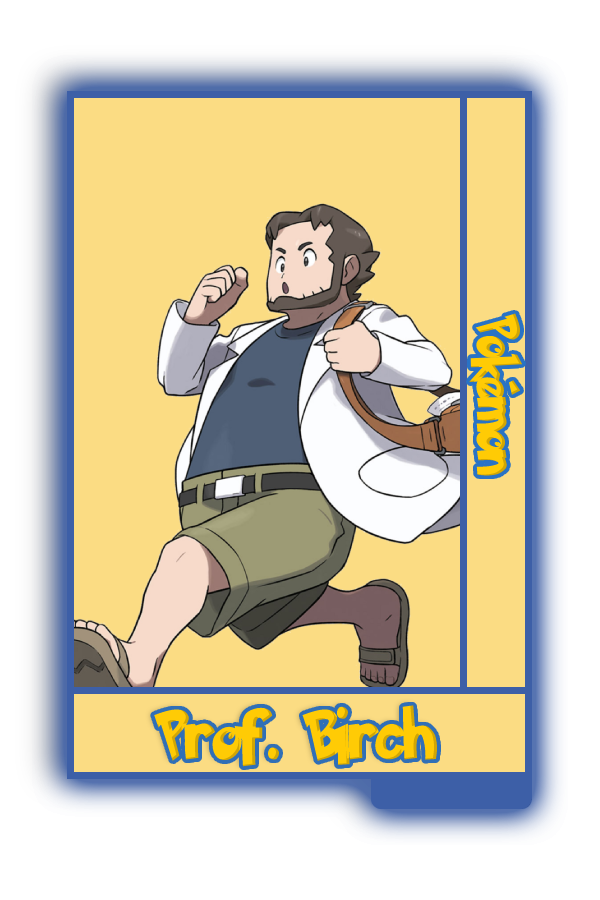
<style>
.page{position:relative;width:600px;height:900px;background:#fbdc83}
.page>*{position:absolute;margin:0}
.t1{font:48.8px "PokemonSolidNormal";color:#ffcb05;scale:0.8 1}
.t2{font:56.6px "PokemonSolidNormal";color:#ffcb05;scale:0.92 1}
</style>
<div class="page">
<p class="t1" style="left:469px;top:313px;width:54px;height:163px;rotate:90deg">Pokémon</p>
<p class="t2" style="left:154px;top:705px;width:284px;height:62px">Prof. Birch</p>
</div>
